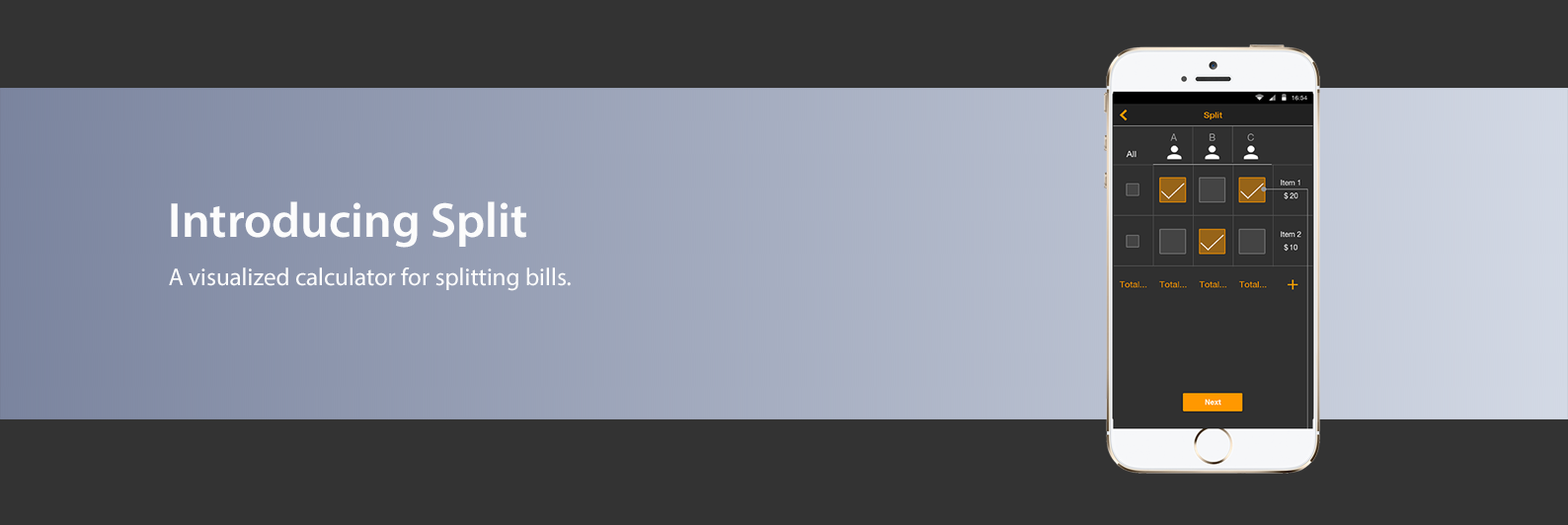
<style>
.page{position:relative;width:1568px;height:525px;background:#333333}
.page>*{position:absolute;margin:0}
.t1{font:49.4px "MyriadPro-Semibold";color:#fcfcfc}
.t2{font:24.7px "MyriadPro-Regular";color:#fcfcfc}
</style>
<div class="page">
<p class="t1" style="left:171px;top:201px;width:355px;height:47px">Introducing Split</p>
<p class="t2" style="left:169px;top:268px;width:402px;height:23px">A visualized calculator for splitting bills.</p>
</div>
